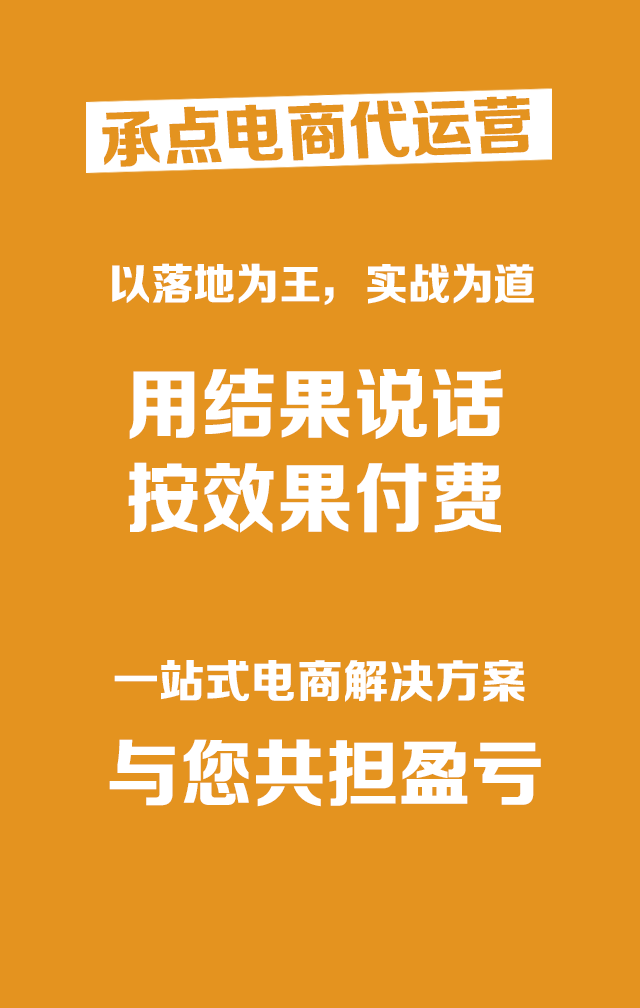
<style>
.page{position:relative;width:640px;height:1008px;background:#e4931f}
.page>*{position:absolute;margin:0}
.t1{font:63.7px "FZZDHJW--GB1-0";letter-spacing:0.005em;color:#e4931f;text-transform:uppercase}
.t2{font:43.5px "FZZDHJW--GB1-0";letter-spacing:0.005em;color:#ffffff;text-transform:uppercase}
.t3{font:77.3px/93.6px "FZZDHJW--GB1-0";letter-spacing:0.005em;color:#ffffff;text-transform:uppercase}
.t4{font:46px "FZZDHJW--GB1-0";letter-spacing:0.005em;color:#ffffff;text-transform:uppercase}
.t5{font:73.6px "FZZDHJW--GB1-0";letter-spacing:0.005em;color:#ffffff;text-transform:uppercase}
</style>
<div class="page">
<p class="t1" style="left:102px;top:96px;width:428px;height:71px;rotate:-2deg">承点电商代运营</p>
<p class="t2" style="left:112px;top:263px;width:422px;height:42px">以落地为王，实战为道</p>
<p class="t3" style="left:128px;top:368px;width:375px;height:165px;text-align:center">用结果说话<br>按效果付费</p>
<p class="t4" style="left:114px;top:660px;width:411px;height:42px">一站式电商解决方案</p>
<p class="t5" style="left:109px;top:739px;width:432px;height:68px">与您共担盈亏</p>
</div>
